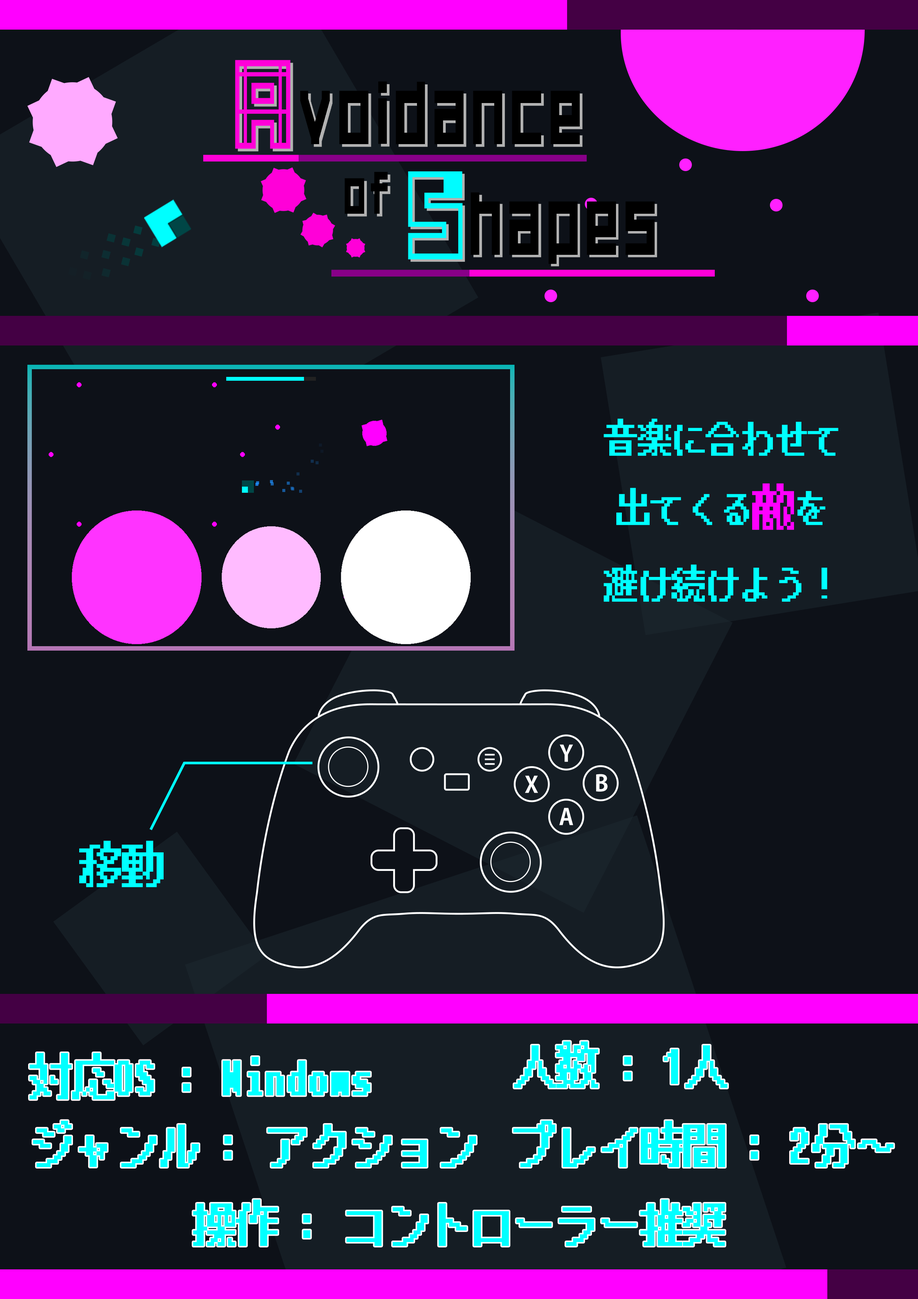
<style>
.page{position:relative;width:918px;height:1299px;background:#0d1118}
.page>*{position:absolute;margin:0}
.t1{font:37px "PixelMplus12-Bold";letter-spacing:0.02em;color:#00ffff;scale:0.9 1}
.t2{font:46.3px "PixelMplus12-Bold";letter-spacing:0.02em;color:#ff00ff;scale:0.9 1}
.t3{font:22.3px "KozGoPr6N-Bold";letter-spacing:0.1em;color:#ffffff}
.t4{font:46.3px "PixelMplus12-Bold";letter-spacing:0.02em;color:#00ffff;scale:0.9 1}
</style>
<div class="page">
<p class="t1" style="left:604px;top:418px;width:235px;height:184px;text-align:center">音楽に合わせて<br>出てくる<span class="t2">敵</span>を<br>避け続けよう！</p>
<p class="t3" style="left:560px;top:744px;width:13px;height:18px">Y</p>
<p class="t3" style="left:596px;top:774px;width:12px;height:18px">B</p>
<p class="t3" style="left:525px;top:775px;width:13px;height:18px">X</p>
<p class="t3" style="left:559px;top:807px;width:14px;height:18px">A</p>
<p class="t4" style="left:79px;top:840px;width:85px;height:47px">移動</p>
<p class="t4" style="left:514px;top:1041px;width:213px;height:47px">人数 : 1人</p>
<p class="t4" style="left:30px;top:1053px;width:341px;height:46px">対応OS : Windows</p>
<p class="t4" style="left:33px;top:1120px;width:443px;height:47px">ジャンル : アクション</p>
<p class="t4" style="left:513px;top:1120px;width:381px;height:47px">プレイ時間 : 2分～</p>
<p class="t4" style="left:193px;top:1199px;width:532px;height:47px">操作 : コントローラー推奨</p>
</div>
